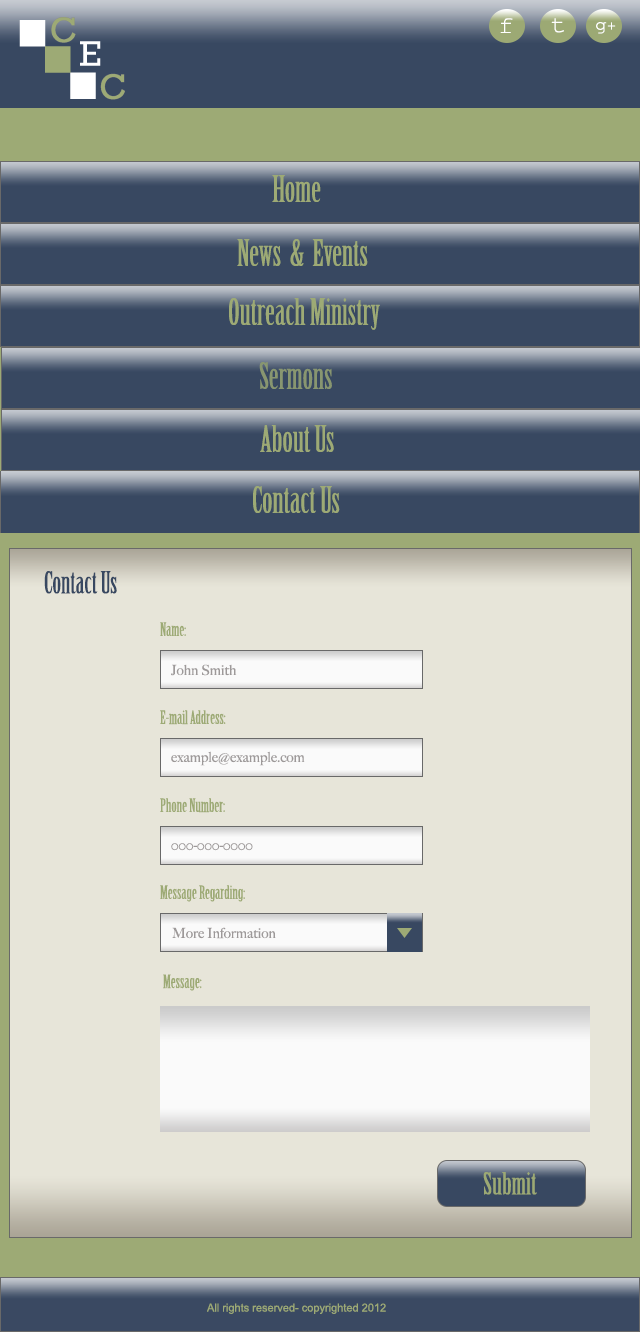
<style>
.page{position:relative;width:640px;height:1332px;background:#e7e5d9}
.page>*{position:absolute;margin:0}
.t1{font:24px "CourierNewPSMT";color:#ffffff;scale:1.1 1}
.t2{font:18px "CourierNewPSMT";color:#ffffff;scale:1.1 1}
.t3{font:14px "CourierNewPSMT";color:#ffffff;scale:1.1 1}
.t4{font:36px "BirchStd";color:#9daa75}
.t5{font:36px "BirchStd";color:#889670}
.t6{font:30px "BirchStd";color:#384861}
.t7{font:18px "BirchStd";color:#9daa75}
.t8{font:14px "BigCaslon-Medium";color:#9d9999}
.t9{font:30px "BirchStd";color:#9ca974;scale:1.08 1}
.t10{font:11.1px "ArialMT";color:#9daa75}
</style>
<div class="page">
<p class="t1" style="left:500px;top:18px;width:13px;height:15px">f</p>
<p class="t1" style="left:551px;top:18px;width:13px;height:15px">t</p>
<p class="t2" style="left:596px;top:22px;width:20px;height:12px">g<span class="t3">+</span></p>
<p class="t4" style="left:272px;top:175px;width:49px;height:27px">Home</p>
<p class="t4" style="left:237px;top:239px;width:131px;height:27px">News  &amp;  Events</p>
<p class="t4" style="left:229px;top:298px;width:151px;height:32px">Outreach Ministry</p>
<p class="t5" style="left:259px;top:362px;width:73px;height:27px">Sermons</p>
<p class="t4" style="left:260px;top:425px;width:74px;height:27px">About Us</p>
<p class="t4" style="left:253px;top:486px;width:87px;height:27px">Contact Us</p>
<p class="t6" style="left:44px;top:571px;width:73px;height:23px">Contact Us</p>
<p class="t7" style="left:160px;top:622px;width:26px;height:14px">Name:</p>
<p class="t8" style="left:171px;top:664px;width:66px;height:12px">John Smith</p>
<p class="t7" style="left:160px;top:710px;width:66px;height:15px">E-mail Address:</p>
<p class="t8" style="left:171px;top:751px;width:134px;height:15px">example@example.com</p>
<p class="t7" style="left:160px;top:798px;width:65px;height:15px">Phone Number:</p>
<p class="t8" style="left:171px;top:843px;width:82px;height:8px">000-000-0000</p>
<p class="t7" style="left:160px;top:885px;width:85px;height:17px">Message Regarding:</p>
<p class="t8" style="left:172px;top:927px;width:104px;height:12px">More Information</p>
<p class="t7" style="left:163px;top:974px;width:39px;height:17px">Message:</p>
<p class="t9" style="left:483px;top:1172px;width:54px;height:23px">Submit</p>
<p class="t10" style="left:207px;top:1303px;width:179px;height:11px">All rights reserved- copyrighted 2012</p>
</div>
